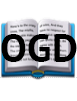
<style>
.page{position:relative;width:77px;height:101px;background:#ffffff}
.page>*{position:absolute;margin:0}
.t1{font:40px "PTSans-Bold";color:#000000}
</style>
<div class="page">
<p class="t1" style="left:1px;top:34px;width:76px;height:28px">OGD</p>
</div>
